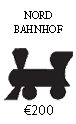
<style>
.page{position:relative;width:76px;height:124px;background:#ffffff}
.page>*{position:absolute;margin:0}
.t1{font:12px "AdobeDevanagari-Regular";color:#000000;scale:0.9 1}
.t2{font:14px "MyriadPro-Regular";color:#000000}
</style>
<div class="page">
<p class="t1" style="left:14px;top:11px;width:49px;height:22px;text-align:center">NORD<br>BAHNHOF</p>
<p class="t2" style="left:24px;top:105px;width:29px;height:10px">€200</p>
</div>
